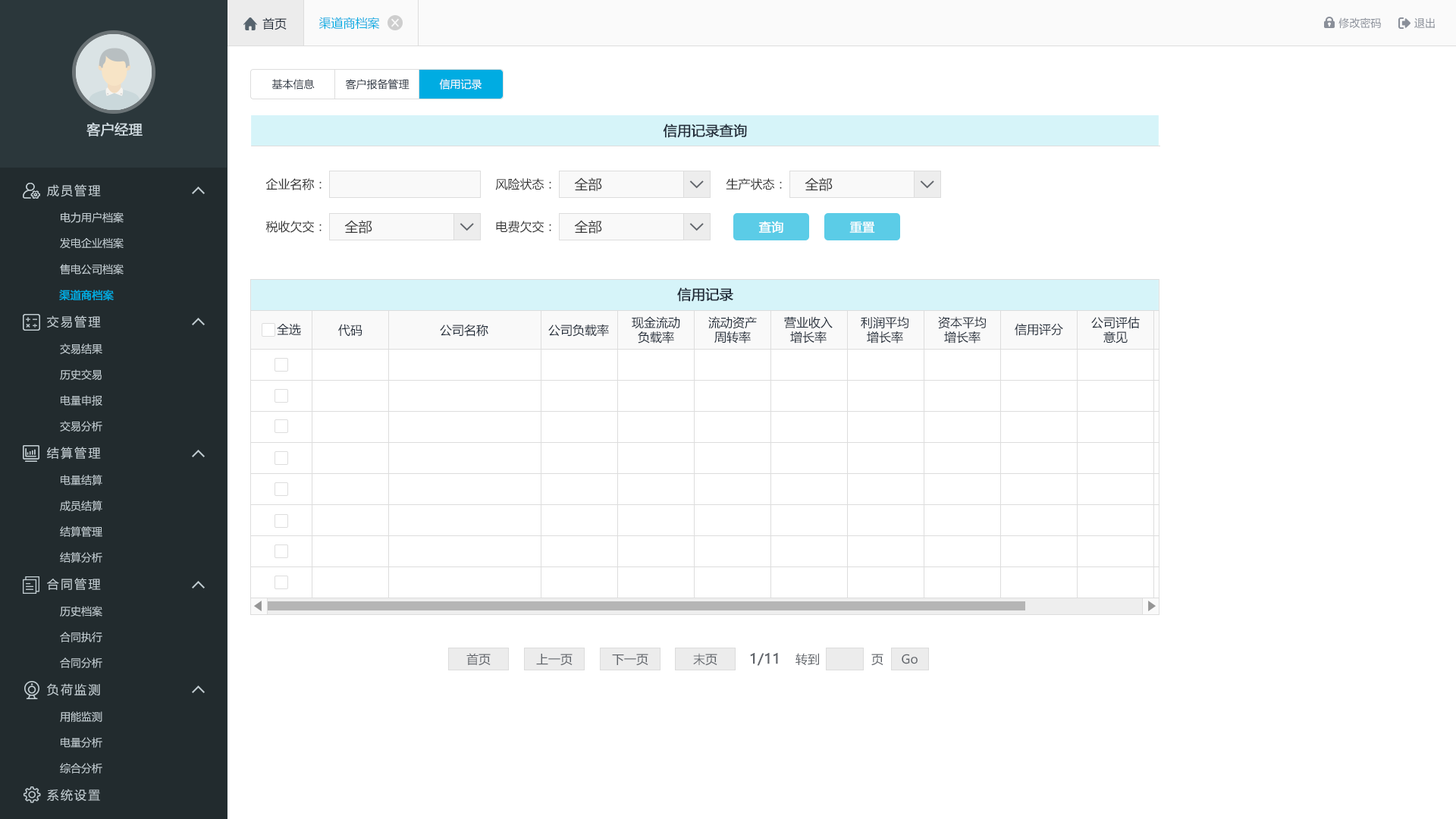
<style>
.page{position:relative;width:1456px;height:819px;background:#ffffff}
.page>*{position:absolute;margin:0}
.t1{font:12.1px "MicrosoftYaHei";color:#242e3b}
.t2{font:12.1px "MicrosoftYaHei";color:#00ace2}
.t3{font:10.6px "MicrosoftYaHei";color:#8a8f99}
.t4{font:10.6px "MicrosoftYaHei";color:#242e3b}
.t5{font:10.6px "MicrosoftYaHei";color:#ffffff}
.t6{font:13.6px "MicrosoftYaHei";color:#d1dce2;font-weight:bold}
.t7{font:13.6px "MicrosoftYaHei";color:#242e3b;font-weight:bold}
.t8{font:12.1px "MicrosoftYaHei";letter-spacing:0.14em;color:#c2cdd2}
.t9{font:12.1px "MicrosoftYaHei";color:#333333}
.t10{font:13.6px "MicrosoftYaHei";color:#333333}
.t11{font:10.6px "MicrosoftYaHei";color:#c2cdd2}
.t12{font:12.1px "MicrosoftYaHei";color:#ffffff;font-weight:bold}
.t13{font:10.6px "MicrosoftYaHei";color:#00ace2;font-weight:bold}
.t14{font:12.1px "MicrosoftYaHei";color:#61656b}
.t15{font:13.6px "MicrosoftYaHei";color:#61656b;font-weight:bold}
</style>
<div class="page">
<p class="t1" style="left:262px;top:17px;width:25px;height:13px">首页</p>
<p class="t2" style="left:318px;top:17px;width:62px;height:13px">渠道商档案</p>
<p class="t3" style="left:1338px;top:17px;width:43px;height:12px">修改密码</p>
<p class="t3" style="left:1414px;top:17px;width:21px;height:11px">退出</p>
<p class="t4" style="left:271px;top:79px;width:44px;height:10px">基本信息</p>
<p class="t4" style="left:345px;top:79px;width:64px;height:10px">客户报备管理</p>
<p class="t5" style="left:439px;top:79px;width:43px;height:10px">信用记录</p>
<p class="t6" style="left:86px;top:122px;width:57px;height:14px">客户经理</p>
<p class="t7" style="left:663px;top:124px;width:84px;height:14px">信用记录查询</p>
<p class="t8" style="left:47px;top:184px;width:54px;height:13px">成员管理</p>
<p class="t9" style="left:265px;top:178px;width:57px;height:12px">企业名称：</p>
<p class="t9" style="left:495px;top:178px;width:56px;height:12px">风险状态：</p>
<p class="t10" style="left:574px;top:177px;width:28px;height:14px">全部</p>
<p class="t9" style="left:726px;top:178px;width:56px;height:12px">生产状态：</p>
<p class="t10" style="left:805px;top:177px;width:28px;height:14px">全部</p>
<p class="t11" style="left:61px;top:212px;width:63px;height:11px">电力用户档案</p>
<p class="t9" style="left:265px;top:221px;width:57px;height:12px">税收欠交：</p>
<p class="t10" style="left:344px;top:220px;width:28px;height:14px">全部</p>
<p class="t9" style="left:496px;top:221px;width:55px;height:12px">电费欠交：</p>
<p class="t10" style="left:574px;top:220px;width:28px;height:14px">全部</p>
<p class="t12" style="left:758px;top:221px;width:25px;height:12px">查询</p>
<p class="t12" style="left:849px;top:221px;width:26px;height:12px">重置</p>
<p class="t11" style="left:60px;top:237px;width:64px;height:12px">发电企业档案</p>
<p class="t11" style="left:60px;top:264px;width:64px;height:11px">售电公司档案</p>
<p class="t13" style="left:59px;top:290px;width:55px;height:11px">渠道商档案</p>
<p class="t7" style="left:677px;top:287px;width:56px;height:15px">信用记录</p>
<p class="t8" style="left:47px;top:315px;width:54px;height:13px">交易管理</p>
<p class="t1" style="left:632px;top:316px;width:48px;height:28px;text-align:center">现金流动<br>负载率</p>
<p class="t1" style="left:708px;top:316px;width:49px;height:28px;text-align:center">流动资产<br>周转率</p>
<p class="t1" style="left:784px;top:316px;width:49px;height:28px;text-align:center">营业收入<br>增长率</p>
<p class="t1" style="left:861px;top:316px;width:47px;height:28px;text-align:center">利润平均<br>增长率</p>
<p class="t1" style="left:938px;top:316px;width:48px;height:28px;text-align:center">资本平均<br>增长率</p>
<p class="t1" style="left:1091px;top:316px;width:49px;height:28px;text-align:center">公司评估<br>意见</p>
<p class="t1" style="left:277px;top:323px;width:24px;height:12px">全选</p>
<p class="t1" style="left:338px;top:324px;width:24px;height:12px">代码</p>
<p class="t1" style="left:440px;top:324px;width:48px;height:13px">公司名称</p>
<p class="t1" style="left:548px;top:324px;width:61px;height:13px">公司负载率</p>
<p class="t1" style="left:1015px;top:323px;width:48px;height:13px">信用评分</p>
<p class="t11" style="left:60px;top:344px;width:42px;height:10px">交易结果</p>
<p class="t11" style="left:60px;top:369px;width:42px;height:11px">历史交易</p>
<p class="t11" style="left:61px;top:395px;width:41px;height:11px">电量申报</p>
<p class="t11" style="left:60px;top:421px;width:42px;height:10px">交易分析</p>
<p class="t8" style="left:47px;top:447px;width:54px;height:13px">结算管理</p>
<p class="t11" style="left:61px;top:475px;width:41px;height:10px">电量结算</p>
<p class="t11" style="left:60px;top:500px;width:42px;height:11px">成员结算</p>
<p class="t11" style="left:60px;top:526px;width:42px;height:11px">结算管理</p>
<p class="t11" style="left:60px;top:552px;width:42px;height:11px">结算分析</p>
<p class="t8" style="left:47px;top:578px;width:54px;height:12px">合同管理</p>
<p class="t11" style="left:60px;top:606px;width:42px;height:11px">历史档案</p>
<p class="t11" style="left:60px;top:632px;width:42px;height:10px">合同执行</p>
<p class="t14" style="left:466px;top:653px;width:25px;height:13px">首页</p>
<p class="t14" style="left:536px;top:654px;width:37px;height:12px">上一页</p>
<p class="t14" style="left:612px;top:654px;width:36px;height:12px">下一页</p>
<p class="t14" style="left:693px;top:653px;width:24px;height:13px">末页</p>
<p class="t15" style="left:750px;top:653px;width:28px;height:13px">1/11</p>
<p class="t14" style="left:795px;top:653px;width:24px;height:12px">转到</p>
<p class="t14" style="left:871px;top:654px;width:12px;height:12px">页</p>
<p class="t14" style="left:902px;top:654px;width:16px;height:10px">Go</p>
<p class="t11" style="left:60px;top:657px;width:42px;height:11px">合同分析</p>
<p class="t8" style="left:47px;top:683px;width:53px;height:13px">负荷监测</p>
<p class="t11" style="left:60px;top:711px;width:42px;height:11px">用能监测</p>
<p class="t11" style="left:61px;top:737px;width:41px;height:11px">电量分析</p>
<p class="t11" style="left:60px;top:763px;width:42px;height:10px">综合分析</p>
<p class="t8" style="left:47px;top:789px;width:53px;height:13px">系统设置</p>
</div>
